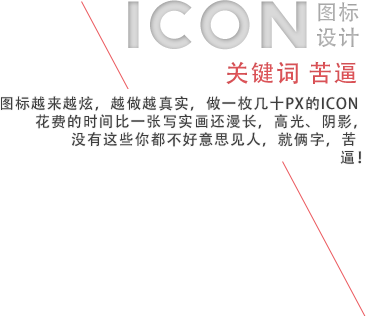
<style>
.page{position:relative;width:366px;height:316px;background:#ffffff}
.page>*{position:absolute;margin:0}
.t1{font:60px "TYPOGRAPHPRO-ExtraBold";letter-spacing:0.06em;color:#d3d3d3}
.t2{font:21px "AdobeHeitiStd-Regular";letter-spacing:0.06em;color:#acacac}
.t3{font:24px "AdobeHeitiStd-Regular";letter-spacing:0.06em;color:#eb595e}
.t4{font:15px "AdobeHeitiStd-Regular";letter-spacing:0.06em;color:#3d3d3d}
</style>
<div class="page">
<p class="t1" style="left:128px;top:0px;width:179px;height:50px">ICON</p>
<p class="t2" style="left:317px;top:2px;width:42px;height:45px">图标<br>设计</p>
<p class="t3" style="left:226px;top:61px;width:131px;height:24px">关键词 苦逼</p>
<p class="t4" style="left:1px;top:96px;width:360px;height:68px">图标越来越炫，越做越真实，做一枚几十PX的ICON<br> 花费的时间比一张写实画还漫长，高光、阴影，<br>  没有这些你都不好意思见人，就俩字，苦<br>             逼！</p>
</div>
